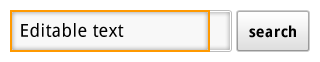
<style>
.page{position:relative;width:320px;height:62px;background:#ffffff}
.page>*{position:absolute;margin:0}
.t1{font:18px "DroidSans"}
.t2{font:18px "DroidSans";color:#000000}
.t3{font:15px "DroidSans-Bold";color:#000000}
</style>
<div class="page">
<p class="t1" style="left:21px;top:22px;width:103px;height:14px">Editable text</p>
<p class="t2" style="left:21px;top:23px;width:103px;height:14px">Editable text</p>
<p class="t2" style="left:21px;top:23px;width:103px;height:14px">Editable text</p>
<p class="t2" style="left:21px;top:23px;width:103px;height:14px">Editable text</p>
<p class="t3" style="left:249px;top:25px;width:47px;height:13px">search</p>
</div>
